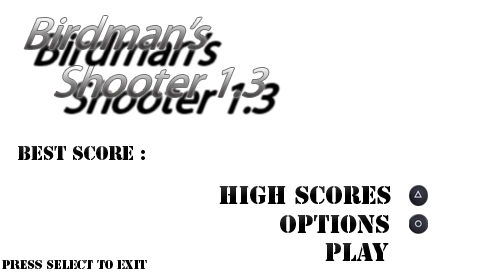
<style>
.page{position:relative;width:480px;height:272px;background:#ffffff}
.page>*{position:absolute;margin:0}
.t1{font:49.6px "MyriadPro-Regular";scale:0.92 1}
.t2{font:48px "MyriadPro-Regular";scale:0.93 1}
.t3{font:18px "StencilStd";color:#010101}
.t4{font:24px "StencilStd";color:#000000}
.t5{font:24px "StencilStd";color:#010101}
.t6{font:12px "StencilStd";color:#000000}
</style>
<div class="page">
<p class="t1" style="left:24px;top:16px;width:187px;height:33px">Birdman’s</p>
<p class="t2" style="left:54px;top:65px;width:215px;height:32px">Shooter 1.3</p>
<p class="t3" style="left:18px;top:146px;width:127px;height:14px">Best Score :</p>
<p class="t4" style="left:219px;top:186px;width:172px;height:18px">High Scores</p>
<p class="t4" style="left:280px;top:215px;width:109px;height:18px">options</p>
<p class="t5" style="left:325px;top:243px;width:64px;height:18px">Play</p>
<p class="t6" style="left:2px;top:260px;width:145px;height:9px">Press SELECT To Exit</p>
</div>
